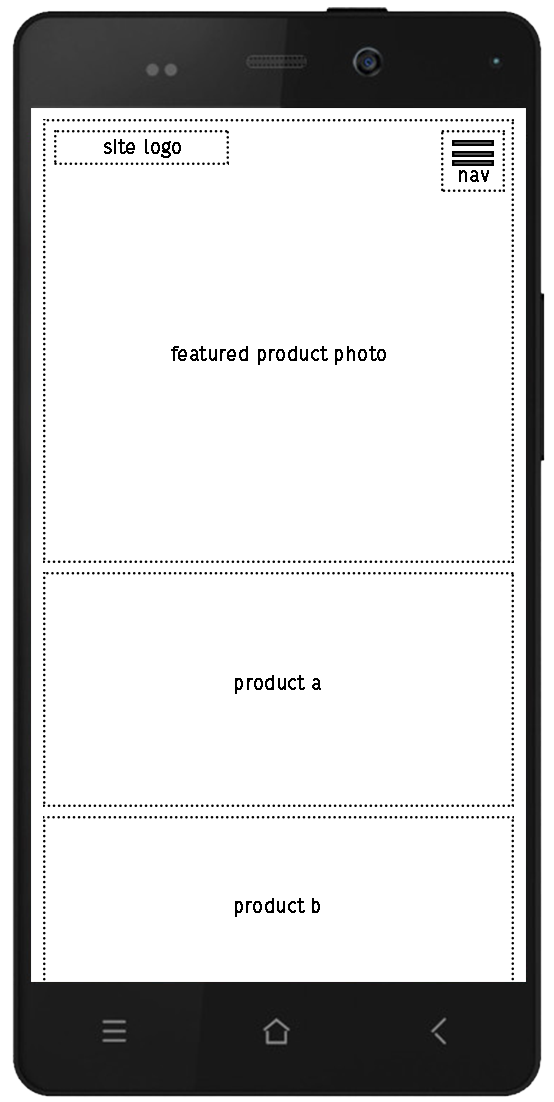
<style>
.page{position:relative;width:554px;height:1102px;background:#ffffff}
.page>*{position:absolute;margin:0}
.t1{font:18.7px "FiraSans-Hair";color:#000000;font-weight:bold}
</style>
<div class="page">
<p class="t1" style="left:104px;top:139px;width:77px;height:19px">site logo</p>
<p class="t1" style="left:459px;top:170px;width:30px;height:12px">nav</p>
<p class="t1" style="left:171px;top:346px;width:215px;height:19px">featured product photo</p>
<p class="t1" style="left:235px;top:675px;width:86px;height:19px">product a</p>
<p class="t1" style="left:235px;top:898px;width:85px;height:19px">product b</p>
</div>
